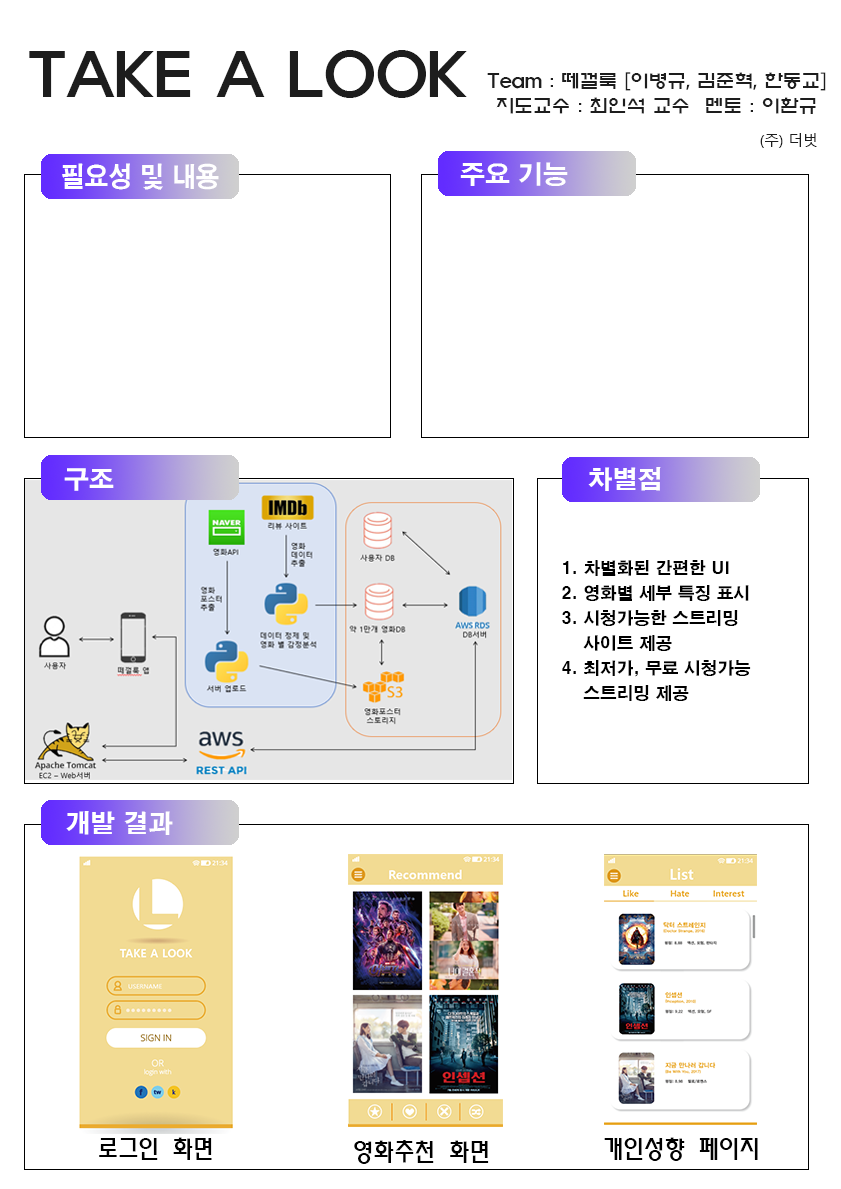
<style>
.page{position:relative;width:841px;height:1189px;background:#ffffff}
.page>*{position:absolute;margin:0}
.t1{font:58.3px "ExpoM-HM";letter-spacing:-0.005em;color:#1d1d1d}
.t2{font:18.8px/25px "ExpoM-HM";letter-spacing:-0.005em;color:#1d1d1d}
.t3{font:14.6px "MalgunGothic";letter-spacing:-0.005em;color:#1d1d1d}
.t4{font:27.1px "H2gtrE";color:#ffffff;scale:0.88 1}
.t5{font:25px "H2gtrE";color:#ffffff}
.t6{font:16.7px/25px "H2gtrE";color:#000000}
.t7{font:25px "MoeumTR-HM";color:#000000}
</style>
<div class="page">
<p class="t1" style="left:29px;top:50px;width:438px;height:48px">TAKE A LOOK</p>
<p class="t2" style="left:487px;top:72px;width:339px;height:42px;text-align:center">Team : 떼껄룩 [이병규, 김준혁, 한동교]<br>지도교수 : 최인석 교수  멘토 : 이환규</p>
<p class="t3" style="left:760px;top:133px;width:57px;height:15px">(주) 더벗</p>
<p class="t4" style="left:62px;top:163px;width:157px;height:27px">필요성 및 내용</p>
<p class="t5" style="left:460px;top:162px;width:108px;height:24px">주요 기능</p>
<p class="t5" style="left:64px;top:468px;width:50px;height:23px">구조</p>
<p class="t5" style="left:588px;top:467px;width:73px;height:24px">차별점</p>
<p class="t6" style="left:562px;top:560px;width:189px;height:141px">1. 차별화된 간편한 UI<br>2. 영화별 세부 특징 표시<br>3. 시청가능한 스트리밍<br>    사이트 제공<br>4. 최저가, 무료 시청가능<br>    스트리밍 제공</p>
<p class="t5" style="left:66px;top:811px;width:107px;height:24px">개발 결과</p>
<p class="t7" style="left:99px;top:1137px;width:113px;height:23px">로그인 화면</p>
<p class="t7" style="left:354px;top:1140px;width:135px;height:24px">영화추천 화면</p>
<p class="t7" style="left:604px;top:1137px;width:154px;height:24px">개인성향 페이지</p>
</div>
